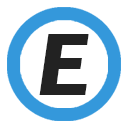
<style>
.page{position:relative;width:128px;height:128px;background:#ffffff}
.page>*{position:absolute;margin:0}
.t1{font:90px "GillSans-BoldItalic";color:#222222}
</style>
<div class="page">
<p class="t1" style="left:39px;top:34px;width:50px;height:61px">E</p>
</div>
